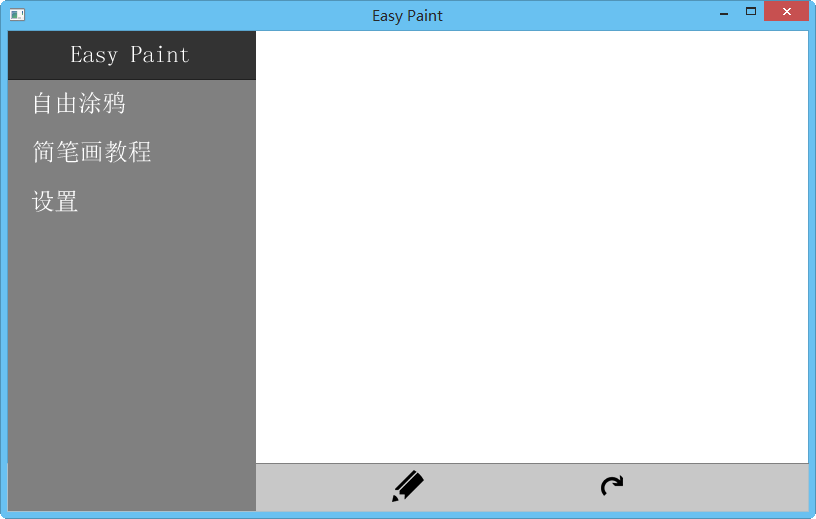
<style>
.page{position:relative;width:816px;height:519px;background:#ffffff}
.page>*{position:absolute;margin:0}
.t1{font:24px "SimSun";color:#ffffff}
</style>
<div class="page">
<p class="t1" style="left:71px;top:45px;width:118px;height:21px">Easy Paint</p>
<p class="t1" style="left:34px;top:91px;width:91px;height:23px">自由涂鸦</p>
<p class="t1" style="left:33px;top:140px;width:118px;height:23px">简笔画教程</p>
<p class="t1" style="left:31px;top:190px;width:47px;height:22px">设置</p>
</div>
